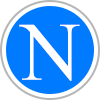
<style>
.page{position:relative;width:100px;height:100px;background:#007aff}
.page>*{position:absolute;margin:0}
.t1{font:83.3px "TimesNewRomanPSMT";letter-spacing:-0.01em;color:#ffffff}
</style>
<div class="page">
<p class="t1" style="left:19px;top:24px;width:61px;height:57px">N</p>
</div>
